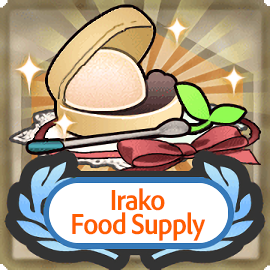
<style>
.page{position:relative;width:270px;height:270px}
.page>*{position:absolute;margin:0}
.t1{font:30px/24px "AdobeClean-Bold";letter-spacing:-0.04em;color:#ff5d00;scale:0.9 1}
</style>
<div class="page">
<p class="t1" style="left:72px;top:188px;width:133px;height:53px;text-align:center">Irako<br>Food Supply</p>
</div>
